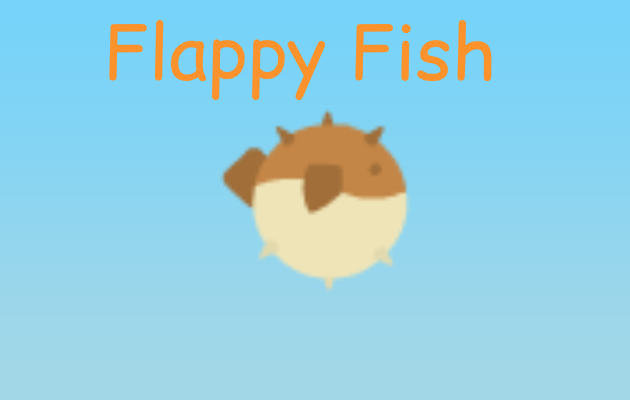
<style>
.page{position:relative;width:630px;height:400px}
.page>*{position:absolute;margin:0}
.t1{font:75px "ComicRelief";color:#fb922b}
</style>
<div class="page">
<p class="t1" style="left:109px;top:20px;width:383px;height:82px">Flappy Fish</p>
</div>
